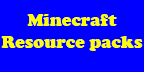
<style>
.page{position:relative;width:144px;height:72px;background:#0000ff}
.page>*{position:absolute;margin:0}
.t1{font:18px "CooperBlack";color:#ffff00}
</style>
<div class="page">
<p class="t1" style="left:1px;top:14px;width:142px;height:37px;text-align:center">Minecraft<br>Resource packs</p>
</div>
